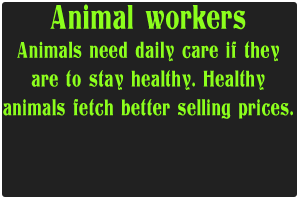
<style>
.page{position:relative;width:300px;height:200px;background:#212121}
.page>*{position:absolute;margin:0}
.t1{font:24px "Titania";letter-spacing:0.025em;color:#8cff1c;scale:0.7 1}
.t2{font:36px "Titania";letter-spacing:0.025em;color:#8cff1c;scale:0.7 1}
</style>
<div class="page">
<p class="t1" style="left:3px;top:4px;width:290px;height:115px;text-align:center"><span class="t2">Animal workers<br></span>Animals need daily care if they<br>are to stay healthy. Healthy<br>animals fetch better selling prices.</p>
</div>
